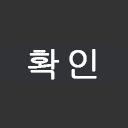
<style>
.page{position:relative;width:128px;height:128px;background:#333333}
.page>*{position:absolute;margin:0}
.t1{font:36px "Gulim";letter-spacing:0.075em;color:#ffffff;font-weight:bold}
</style>
<div class="page">
<p class="t1" style="left:28px;top:49px;width:69px;height:31px">확인</p>
</div>
